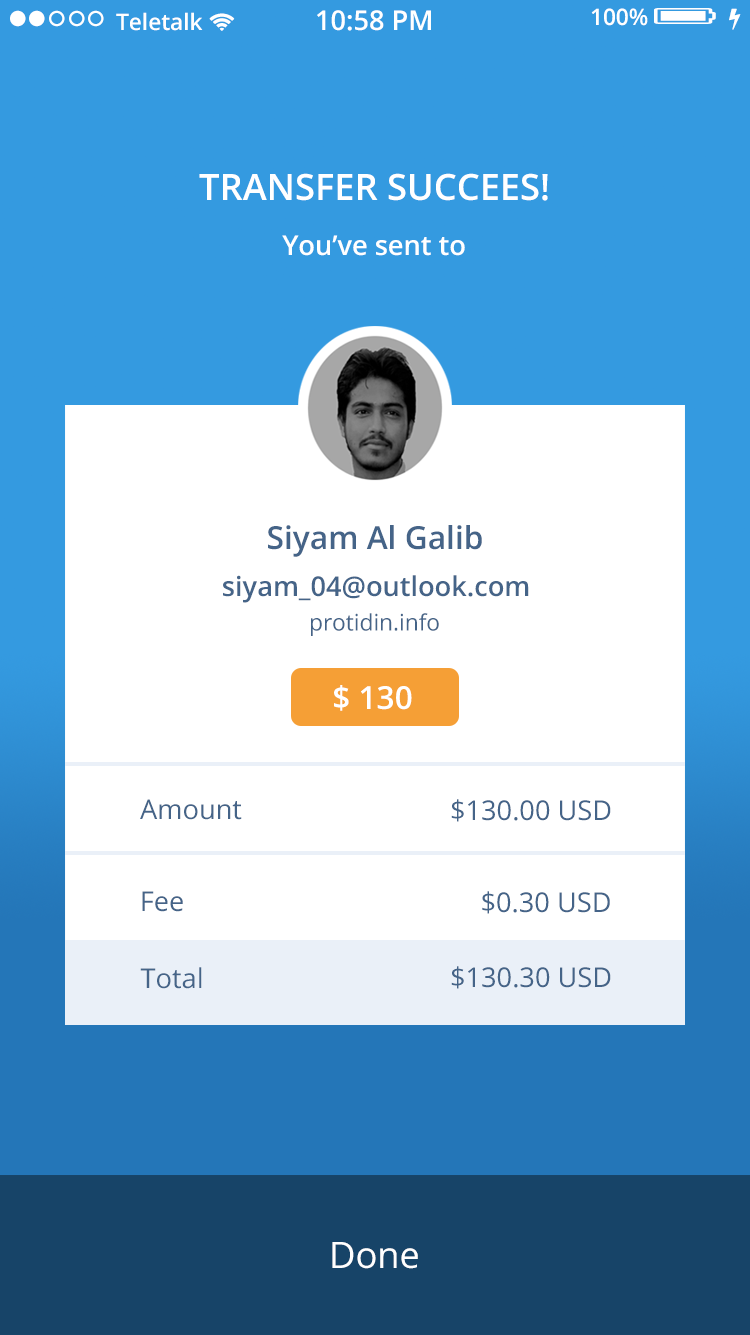
<style>
.page{position:relative;width:750px;height:1335px;background:#349ae0}
.page>*{position:absolute;margin:0}
.t1{font:22.6px "OpenSans-Semibold";color:#ffffff}
.t2{font:27.2px "OpenSans-Semibold";color:#ffffff}
.t3{font:36.2px "OpenSans-Semibold";color:#ffffff}
.t4{font:31.7px "OpenSans-Semibold";color:#456488}
.t5{font:27.2px "OpenSans-Semibold";color:#456488}
.t6{font:22.6px "OpenSans";color:#456488}
.t7{font:31.7px "OpenSans-Semibold";color:#ffffff}
.t8{font:27.2px "OpenSans";color:#456488}
.t9{font:36.2px "OpenSans";color:#ffffff}
</style>
<div class="page">
<p class="t1" style="left:116px;top:12px;width:87px;height:19px">Teletalk</p>
<p class="t2" style="left:317px;top:10px;width:114px;height:21px">10:58 PM</p>
<p class="t1" style="left:591px;top:8px;width:57px;height:18px">100%</p>
<p class="t3" style="left:199px;top:173px;width:349px;height:28px">TRANSFER SUCCEES!</p>
<p class="t2" style="left:282px;top:235px;width:183px;height:21px">You’ve sent to</p>
<p class="t4" style="left:268px;top:525px;width:214px;height:32px">Siyam Al Galib</p>
<p class="t5" style="left:223px;top:575px;width:306px;height:28px">siyam_04@outlook.com</p>
<p class="t6" style="left:311px;top:613px;width:128px;height:23px">protidin.info</p>
<p class="t7" style="left:334px;top:685px;width:78px;height:26px">$ 130</p>
<p class="t8" style="left:140px;top:799px;width:102px;height:21px">Amount</p>
<p class="t8" style="left:451px;top:799px;width:160px;height:23px">$130.00 USD</p>
<p class="t8" style="left:142px;top:891px;width:41px;height:21px">Fee</p>
<p class="t8" style="left:482px;top:891px;width:128px;height:23px">$0.30 USD</p>
<p class="t8" style="left:451px;top:966px;width:160px;height:23px">$130.30 USD</p>
<p class="t8" style="left:140px;top:967px;width:62px;height:22px">Total</p>
<p class="t9" style="left:332px;top:1242px;width:86px;height:27px">Done</p>
</div>
